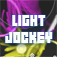
<style>
.page{position:relative;width:57px;height:57px}
.page>*{position:absolute;margin:0}
.t1{font:14px "04b19";color:#ffffff}
</style>
<div class="page">
<p class="t1" style="left:5px;top:15px;width:48px;height:28px;text-align:center">LIGHT<br>JOCKEY</p>
</div>
